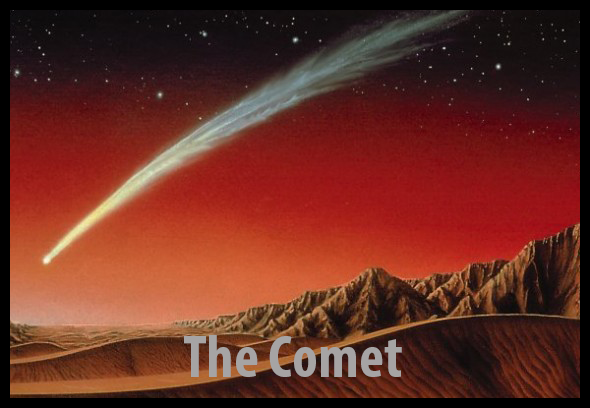
<style>
.page{position:relative;width:590px;height:408px}
.page>*{position:absolute;margin:0}
.t1{font:59.8px "MyriadPro-BoldCond";color:#a6a4a4}
.t2{font:47.8px "MyriadPro-BoldCond";color:#a6a4a4}
</style>
<div class="page">
<p class="t1" style="left:184px;top:335px;width:218px;height:42px"><span class="t2"> </span> The Comet</p>
</div>
